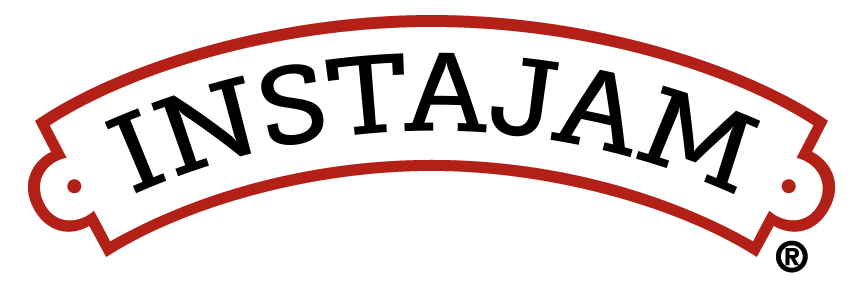
<style>
.page{position:relative;width:864px;height:288px;background:#ffffff}
.page>*{position:absolute;margin:0}
.t1{font:110px "MuseoSlab-500";color:#000000}
</style>
<div class="page">
<p class="t1" style="left:104px;top:52px;width:657px;height:143px">INSTAJAM</p>
</div>
